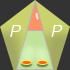
<style>
.page{position:relative;width:70px;height:70px;background:#333333}
.page>*{position:absolute;margin:0}
.t1{font:16.7px "Helvetica-LightOblique";color:#ffffff}
</style>
<div class="page">
<p class="t1" style="left:10px;top:25px;width:11px;height:12px">P</p>
<p class="t1" style="left:51px;top:25px;width:12px;height:12px">P</p>
</div>
